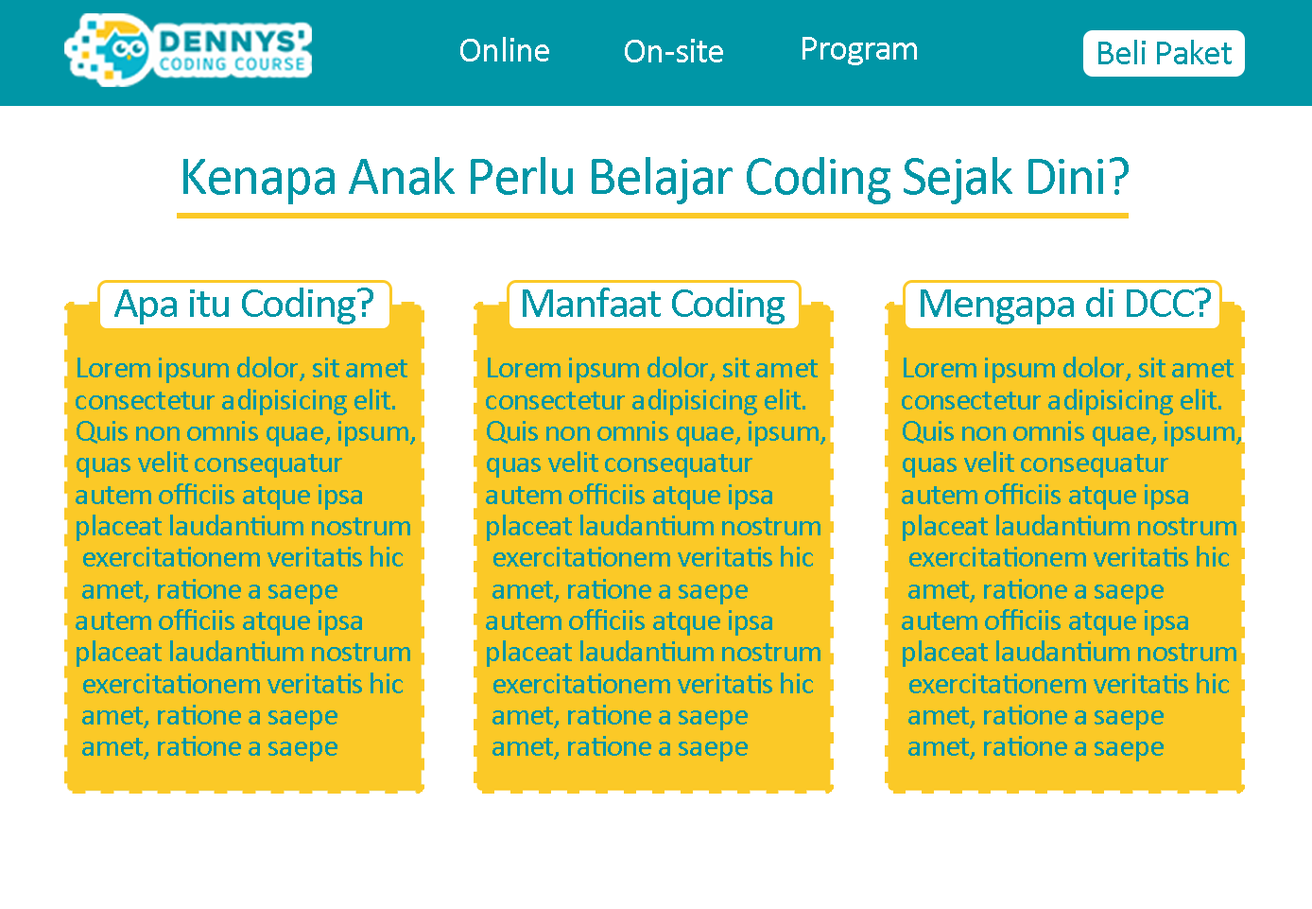
<style>
.page{position:relative;width:1312px;height:909px;background:#ffffff}
.page>*{position:absolute;margin:0}
.t1{font:35.5px "Calibri";letter-spacing:-0.025em;color:#fffdff}
.t2{font:35.5px "Calibri";letter-spacing:-0.025em;color:#0096a6}
.t3{font:55.2px "Calibri";letter-spacing:-0.025em;color:#0096a6}
.t4{font:43.3px "Calibri";letter-spacing:-0.025em;color:#0096a6}
.t5{font:31.5px/31.5px "Calibri";letter-spacing:-0.025em;color:#0096a6}
</style>
<div class="page">
<p class="t1" style="left:460px;top:37px;width:89px;height:24px">Online</p>
<p class="t1" style="left:625px;top:39px;width:98px;height:23px">On-site</p>
<p class="t1" style="left:803px;top:37px;width:114px;height:28px">Program</p>
<p class="t2" style="left:1099px;top:40px;width:133px;height:24px">Beli Paket</p>
<p class="t3" style="left:183px;top:157px;width:946px;height:47px">Kenapa Anak Perlu Belajar Coding Sejak Dini?</p>
<p class="t4" style="left:114px;top:287px;width:259px;height:37px">Apa itu Coding?</p>
<p class="t4" style="left:523px;top:287px;width:262px;height:37px">Manfaat Coding</p>
<p class="t4" style="left:921px;top:287px;width:290px;height:37px">Mengapa di DCC?</p>
<p class="t5" style="left:76px;top:356px;width:339px;height:405px">Lorem ipsum dolor, sit amet<br>consectetur adipisicing elit.<br>Quis non omnis quae, ipsum,<br>quas velit consequatur <br>autem officiis atque ipsa <br>placeat laudantium nostrum<br> exercitationem veritatis hic<br> amet, ratione a saepe<br>autem officiis atque ipsa <br>placeat laudantium nostrum<br> exercitationem veritatis hic<br> amet, ratione a saepe<br> amet, ratione a saepe</p>
<p class="t5" style="left:486px;top:356px;width:339px;height:405px">Lorem ipsum dolor, sit amet<br>consectetur adipisicing elit.<br>Quis non omnis quae, ipsum,<br>quas velit consequatur <br>autem officiis atque ipsa <br>placeat laudantium nostrum<br> exercitationem veritatis hic<br> amet, ratione a saepe<br>autem officiis atque ipsa <br>placeat laudantium nostrum<br> exercitationem veritatis hic<br> amet, ratione a saepe<br> amet, ratione a saepe</p>
<p class="t5" style="left:902px;top:356px;width:339px;height:405px">Lorem ipsum dolor, sit amet<br>consectetur adipisicing elit.<br>Quis non omnis quae, ipsum,<br>quas velit consequatur <br>autem officiis atque ipsa <br>placeat laudantium nostrum<br> exercitationem veritatis hic<br> amet, ratione a saepe<br>autem officiis atque ipsa <br>placeat laudantium nostrum<br> exercitationem veritatis hic<br> amet, ratione a saepe<br> amet, ratione a saepe</p>
</div>
